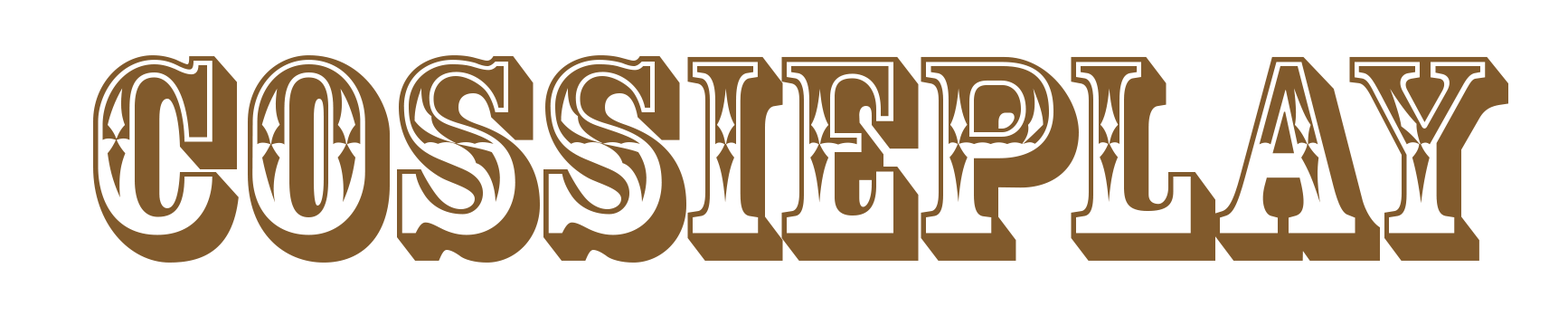
<style>
.page{position:relative;width:1568px;height:316px;background:#ffffff}
.page>*{position:absolute;margin:0}
.t1{font:271.3px "RosewoodStd-Regular";color:#815a2c}
</style>
<div class="page">
<p class="t1" style="left:93px;top:55px;width:1415px;height:207px">CossiePlay</p>
</div>
